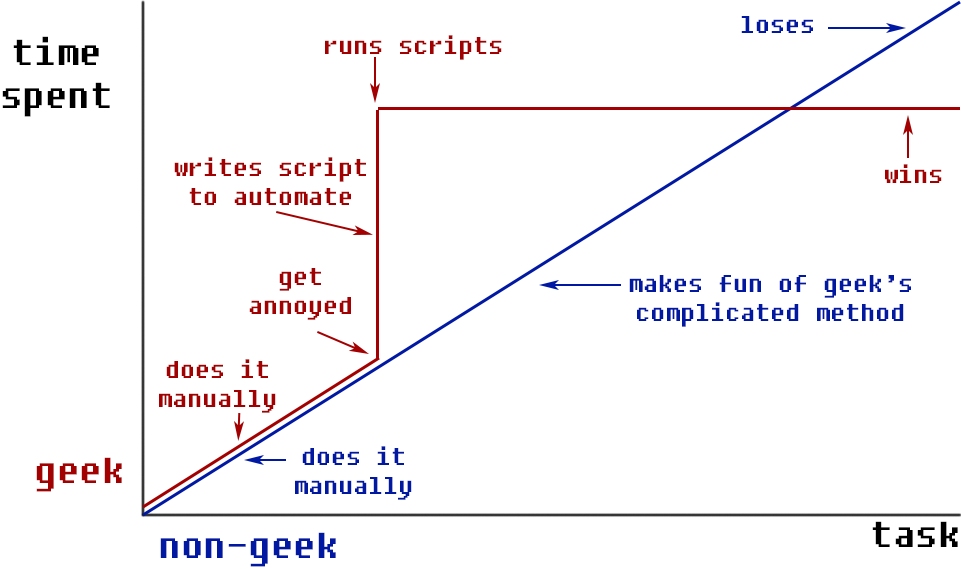
<style>
.page{position:relative;width:961px;height:569px;background:#ffffff}
.page>*{position:absolute;margin:0}
.t1{font:24px "Fixedsys";color:#0118a3}
.t2{font:36px "Fixedsys";color:#000000}
.t3{font:24px "Fixedsys";color:#a30101}
.t4{font:36px "Fixedsys";color:#a30101}
.t5{font:36px "Fixedsys";color:#0118a3}
</style>
<div class="page">
<p class="t1" style="left:741px;top:16px;width:72px;height:17px">loses</p>
<p class="t2" style="left:2px;top:36px;width:108px;height:81px;text-align:center">time<br>spent</p>
<p class="t3" style="left:325px;top:35px;width:177px;height:25px">runs scripts</p>
<p class="t3" style="left:174px;top:157px;width:192px;height:48px;text-align:center">writes script<br>to automate</p>
<p class="t3" style="left:885px;top:164px;width:57px;height:19px">wins</p>
<p class="t3" style="left:249px;top:268px;width:102px;height:52px;text-align:center">get<br>annoyed</p>
<p class="t1" style="left:629px;top:275px;width:282px;height:52px;text-align:center">makes fun of geek’s<br>complicated method</p>
<p class="t3" style="left:159px;top:359px;width:117px;height:54px;text-align:center">does it<br>manually</p>
<p class="t1" style="left:295px;top:446px;width:117px;height:54px;text-align:center">does it<br>manually</p>
<p class="t4" style="left:36px;top:457px;width:86px;height:35px">geek</p>
<p class="t2" style="left:872px;top:521px;width:86px;height:26px">task</p>
<p class="t5" style="left:160px;top:532px;width:176px;height:35px">non-geek</p>
</div>
